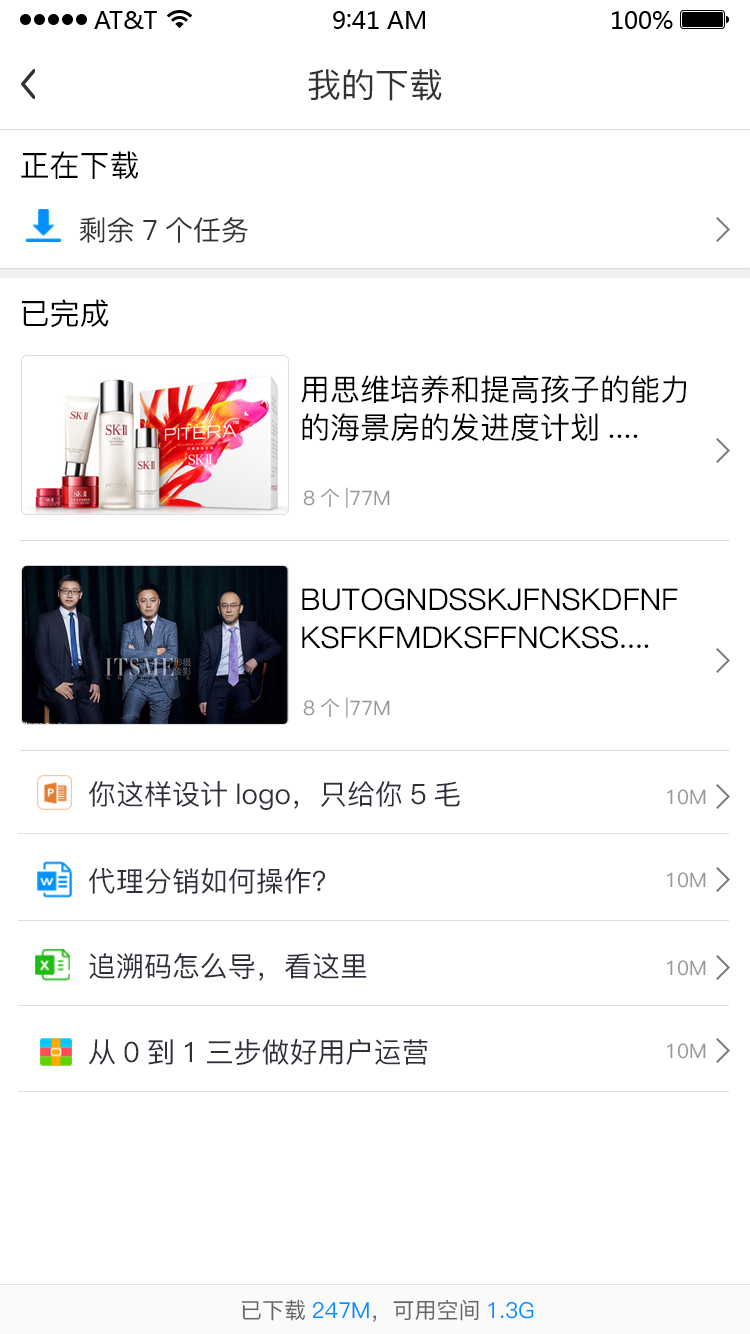
<style>
.page{position:relative;width:750px;height:1334px;background:#ffffff}
.page>*{position:absolute;margin:0}
.t1{font:34px "PingFang-SC-Medium";color:#333333}
.t2{font:30px "PingFang-SC-Medium";color:#000000}
.t3{font:28px "PingFang-SC-Medium";color:#333333}
.t4{font:30px/38px "PingFang-SC-Medium";color:#000000}
.t5{font:20px "PingFang-SC-Medium";color:#999999}
.t6{font:28px "PingFang-SC-Medium";color:#2e313a}
.t7{font:22px "PingFang-SC-Medium";color:#666666}
.t8{font:22px "PingFang-SC-Medium";color:#0090ff}
</style>
<div class="page">
<p class="t1" style="left:308px;top:69px;width:134px;height:32px">我的下载</p>
<p class="t2" style="left:21px;top:151px;width:117px;height:28px">正在下载</p>
<p class="t3" style="left:79px;top:217px;width:169px;height:26px">剩余7个任务</p>
<p class="t2" style="left:22px;top:299px;width:87px;height:28px">已完成</p>
<p class="t4" style="left:301px;top:375px;width:386px;height:66px">用思维培养和提高孩子的能力<br>的海景房的发进度计划....</p>
<p class="t5" style="left:303px;top:487px;width:87px;height:21px">8个|77M</p>
<p class="t4" style="left:302px;top:588px;width:376px;height:61px">BUTOGNDSSKJFNSKDFNF<br>KSFKFMDKSFFNCKSS....</p>
<p class="t5" style="left:303px;top:697px;width:87px;height:21px">8个|77M</p>
<p class="t6" style="left:89px;top:781px;width:371px;height:29px">你这样设计logo，只给你5毛</p>
<p class="t5" style="left:667px;top:789px;width:39px;height:16px">10M</p>
<p class="t6" style="left:89px;top:868px;width:237px;height:26px">代理分销如何操作？</p>
<p class="t5" style="left:667px;top:872px;width:39px;height:16px">10M</p>
<p class="t6" style="left:89px;top:953px;width:278px;height:28px">追溯码怎么导，看这里</p>
<p class="t5" style="left:667px;top:960px;width:39px;height:16px">10M</p>
<p class="t6" style="left:89px;top:1038px;width:339px;height:27px">从0到1三步做好用户运营</p>
<p class="t5" style="left:667px;top:1043px;width:39px;height:16px">10M</p>
<p class="t7" style="left:242px;top:1299px;width:292px;height:23px">已下载<span class="t8">247M</span>，可用空间<span class="t8">1.3G</span></p>
</div>
